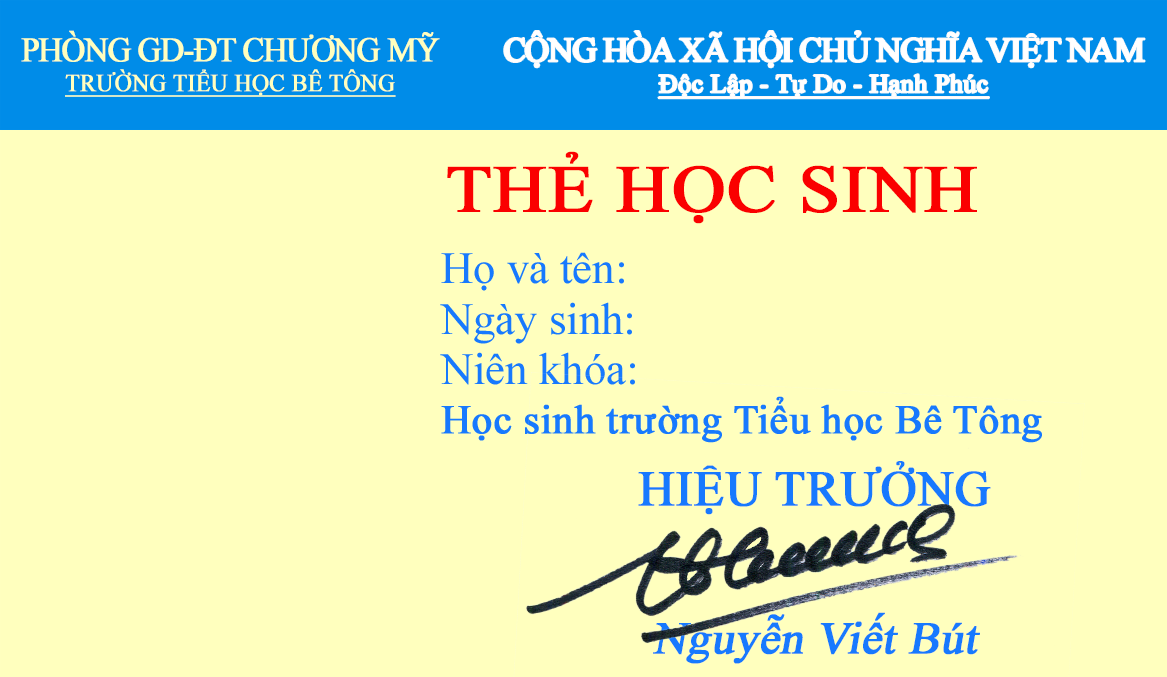
<style>
.page{position:relative;width:1167px;height:677px;background:#ffffbe}
.page>*{position:absolute;margin:0}
.t1{font:24.2px/30.2px "TimesNewRomanPSMT";color:#ffffbe;font-weight:bold;text-decoration:underline;scale:0.96 1}
.t2{font:34.1px/30.2px "TimesNewRomanPSMT";letter-spacing:-0.05em;color:#ffffbe;font-weight:bold;scale:0.96 1}
.t3{font:33.7px "TimesNewRomanPSMT";letter-spacing:-0.05em;color:#ffffff;font-weight:bold}
.t4{font:25.6px "TimesNewRomanPSMT";color:#ffffff;font-weight:bold;text-decoration:underline}
.t5{font:66.7px "TimesNewRomanPSMT";color:#fa0000;font-weight:bold;scale:1.11 1}
.t6{font:45.3px/49.4px "TimesNewRomanPSMT";color:#1779fe;font-weight:bold;font-style:italic}
.t7{font:49.4px/49.4px "TimesNewRomanPSMT";color:#1779fe;font-weight:bold}
</style>
<div class="page">
<p class="t1" style="left:21px;top:30px;width:419px;height:67px;text-align:center"><span class="t2">PHÒNG GD-ĐT CHƯƠNG MỸ<br></span>TRƯỜNG TIỂU HỌC BÊ TÔNG</p>
<p class="t3" style="left:504px;top:31px;width:641px;height:68px;text-align:center">CỘNG HÒA XÃ HỘI CHỦ NGHĨA VIỆT NAM<br><span class="t4">Độc Lập - Tự Do - Hạnh Phúc</span></p>
<p class="t5" style="left:447px;top:151px;width:530px;height:73px">THẺ HỌC SINH</p>
<p class="t6" style="left:638px;top:461px;width:353px;height:203px;text-align:center"><span class="t7">HIỆU TRƯỞNG<br><br><br></span>Nguyễn Viết Bút</p>
</div>
